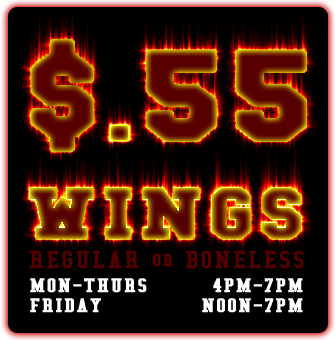
<style>
.page{position:relative;width:335px;height:340px;background:#000000}
.page>*{position:absolute;margin:0}
.t1{font:83.7px "CollegeBold";letter-spacing:0.025em;font-variant:small-caps;font-weight:bold;scale:1.25 1}
.t2{font:25px "CollegeCondensed";letter-spacing:0.025em;color:#550000;text-transform:uppercase;font-weight:bold;scale:1.25 1}
.t3{font:18px "CollegeCondensed";letter-spacing:0.025em;color:#550000;text-transform:uppercase;font-weight:bold;scale:1.25 1}
.t4{font:20px "CollegeCondensed";letter-spacing:0.025em;color:#ffffff;text-transform:uppercase;font-weight:bold;scale:1.25 1}
</style>
<div class="page">
<p class="t1" style="left:110px;top:125px;width:19px;height:16px">.</p>
<p class="t2" style="left:30px;top:250px;width:108px;height:19px">regular</p>
<p class="t3" style="left:153px;top:253px;width:20px;height:14px">or</p>
<p class="t2" style="left:186px;top:250px;width:118px;height:19px">boneless</p>
<p class="t4" style="left:30px;top:278px;width:117px;height:15px">mon-thurs</p>
<p class="t4" style="left:213px;top:278px;width:90px;height:15px">4pm-7pm</p>
<p class="t4" style="left:30px;top:298px;width:71px;height:15px">friday</p>
<p class="t4" style="left:202px;top:298px;width:101px;height:15px">noon-7pm</p>
</div>
